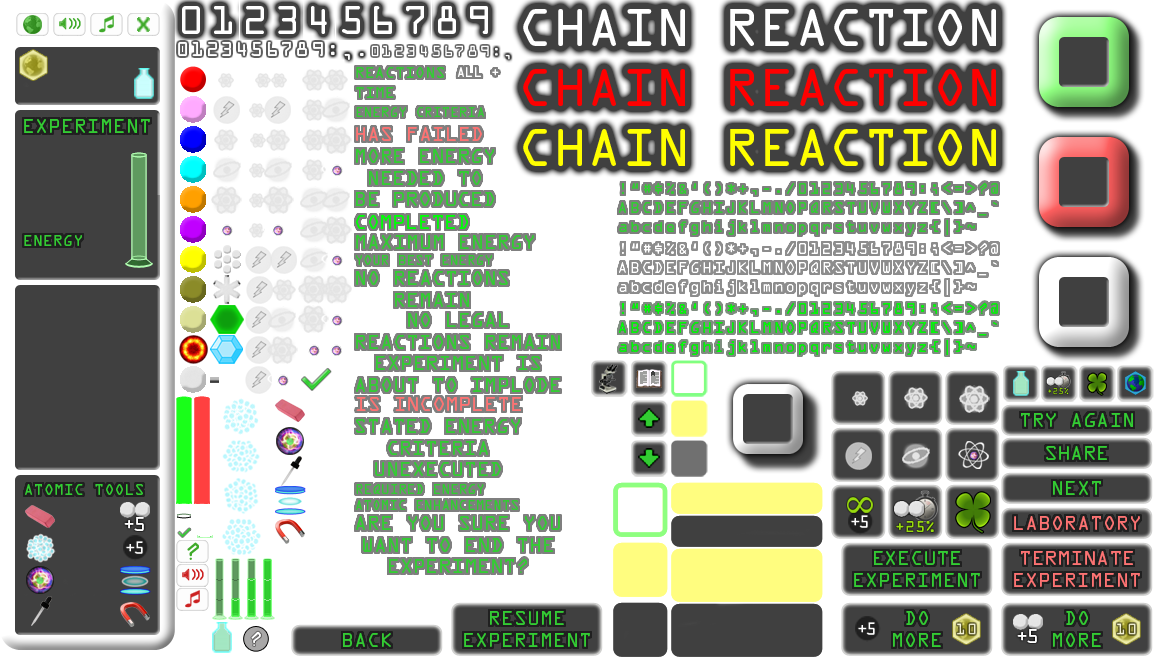
<style>
.page{position:relative;width:1155px;height:658px;background:#ffffff}
.page>*{position:absolute;margin:0}
.t1{font:48px "OCRAStd";color:#ffffff}
.t2{font:14px "OCRAStd";color:#33cc33}
.t3{font:12px "OCRAStd";color:#ffffff}
.t4{font:48px "OCRAStd";color:#ff0000}
.t5{font:12px "OCRAStd";color:#33cc33}
.t6{font:18px "OCRAStd";color:#33cc33}
.t7{font:18px "OCRAStd";color:#fd7373}
.t8{font:18px "OCRAStd";color:#00ff06}
.t9{font:14px "OCRAStd";color:#98da0e}
.t10{font:22px "OCRAStd";color:#3faa2a}
.t11{font:18px "OCRAStd";color:#ffffff}
</style>
<div class="page">
<p class="t1" style="left:523px;top:9px;width:473px;height:37px">CHAIN REACTION</p>
<p class="t2" style="left:356px;top:67px;width:88px;height:11px">REACTIONS</p>
<p class="t3" style="left:457px;top:67px;width:42px;height:10px">ALL +</p>
<p class="t4" style="left:523px;top:69px;width:473px;height:37px">CHAIN REACTION</p>
<p class="t2" style="left:356px;top:87px;width:38px;height:11px">TIME</p>
<p class="t5" style="left:356px;top:107px;width:128px;height:10px">ENERGY CRITERIA</p>
<p class="t6" style="left:24px;top:119px;width:126px;height:14px">EXPERIMENT</p>
<p class="t7" style="left:356px;top:127px;width:126px;height:14px">HAS FAILED</p>
<p class="t6" style="left:356px;top:149px;width:138px;height:57px;text-align:center">MORE ENERGY<br>NEEDED TO<br>BE PRODUCED</p>
<p class="t8" style="left:356px;top:215px;width:112px;height:14px">COMPLETED</p>
<p class="t2" style="left:24px;top:235px;width:58px;height:11px">ENERGY</p>
<p class="t6" style="left:356px;top:235px;width:178px;height:14px">MAXIMUM ENERGY</p>
<p class="t5" style="left:356px;top:255px;width:136px;height:10px">YOUR BEST ENERGY</p>
<p class="t6" style="left:356px;top:271px;width:152px;height:36px;text-align:center">NO REACTIONS<br>REMAIN</p>
<p class="t6" style="left:356px;top:313px;width:204px;height:36px;text-align:center">NO LEGAL<br>REACTIONS REMAIN</p>
<p class="t6" style="left:356px;top:356px;width:204px;height:36px;text-align:center">EXPERIMENT IS<br>ABOUT TO IMPLODE</p>
<p class="t7" style="left:356px;top:397px;width:165px;height:14px">IS INCOMPLETE</p>
<p class="t6" style="left:1021px;top:413px;width:112px;height:14px">TRY AGAIN</p>
<p class="t6" style="left:356px;top:419px;width:164px;height:57px;text-align:center">STATED ENERGY<br>CRITERIA<br>UNEXECUTED</p>
<p class="t6" style="left:1046px;top:446px;width:61px;height:14px">SHARE</p>
<p class="t2" style="left:25px;top:484px;width:118px;height:11px">ATOMIC TOOLS</p>
<p class="t5" style="left:356px;top:484px;width:128px;height:10px">REQUIRED ENERGY</p>
<p class="t6" style="left:1053px;top:481px;width:48px;height:14px">NEXT</p>
<p class="t5" style="left:356px;top:500px;width:162px;height:10px">ATOMIC ENHANCEMENTS</p>
<p class="t6" style="left:356px;top:516px;width:204px;height:57px;text-align:center">ARE YOU SURE YOU<br>WANT TO END THE<br>EXPERIMENT?</p>
<p class="t9" style="left:896px;top:521px;width:38px;height:11px">+25%</p>
<p class="t7" style="left:1014px;top:516px;width:126px;height:14px">LABORATORY</p>
<p class="t10" style="left:187px;top:542px;width:12px;height:18px">?</p>
<p class="t6" style="left:854px;top:551px;width:126px;height:36px;text-align:center">EXECUTE<br>EXPERIMENT</p>
<p class="t7" style="left:1014px;top:551px;width:126px;height:36px;text-align:center">TERMINATE<br>EXPERIMENT</p>
<p class="t6" style="left:464px;top:611px;width:126px;height:36px;text-align:center">RESUME<br>EXPERIMENT</p>
<p class="t6" style="left:893px;top:611px;width:48px;height:36px;text-align:center">DO<br>MORE</p>
<p class="t6" style="left:1053px;top:611px;width:48px;height:36px;text-align:center">DO<br>MORE</p>
<p class="t11" style="left:251px;top:631px;width:10px;height:15px">?</p>
<p class="t6" style="left:343px;top:633px;width:48px;height:14px">BACK</p>
</div>
